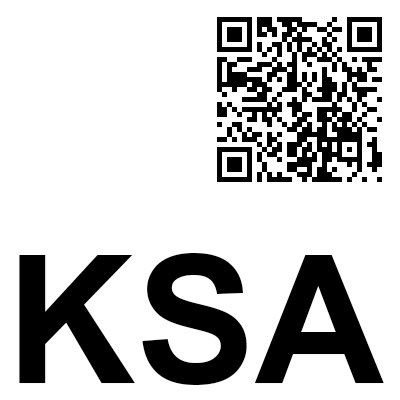
<style>
.page{position:relative;width:400px;height:400px;background:#ffffff}
.page>*{position:absolute;margin:0}
.t1{font:179.3px "Arial-BoldMT";color:#000000}
</style>
<div class="page">
<p class="t1" style="left:19px;top:253px;width:365px;height:132px">KSA</p>
</div>
